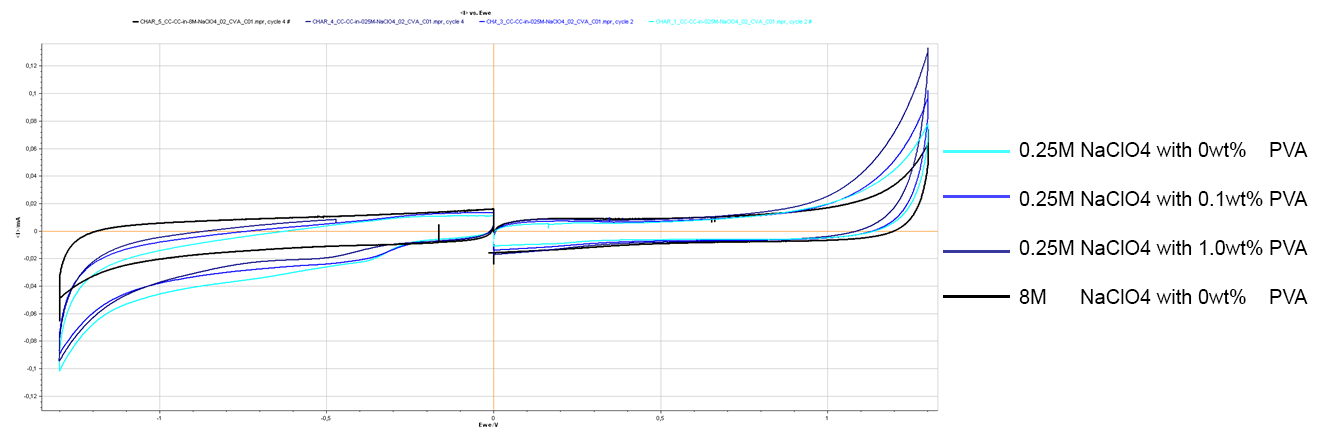
<style>
.page{position:relative;width:1323px;height:435px;background:#ffffff}
.page>*{position:absolute;margin:0}
.t1{font:20px/49px "ArialMT";color:#000000}
</style>
<div class="page">
<p class="t1" style="left:1019px;top:142px;width:289px;height:162px">0.25M NaClO4 with 0wt%    PVA<br>0.25M NaClO4 with 0.1wt% PVA<br>0.25M NaClO4 with 1.0wt% PVA<br>8M      NaClO4 with 0wt%    PVA</p>
</div>
